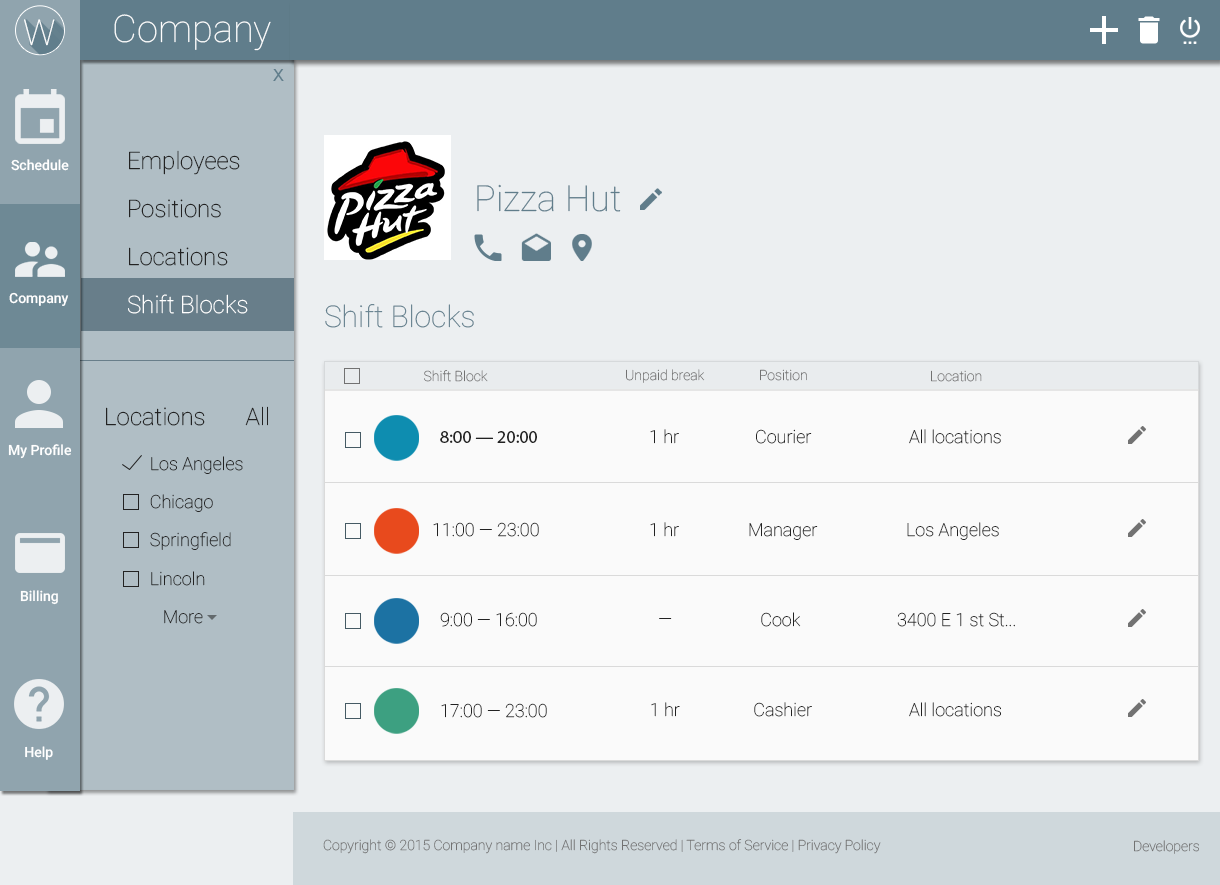
<style>
.page{position:relative;width:1220px;height:885px;background:#eceff1}
.page>*{position:absolute;margin:0}
.t1{font:38px "Roboto-Thin";color:#ffffff}
.t2{font:35.7px "Roboto-Thin";color:#ffffff}
.t3{font:18px "Raavi";color:#607d8b}
.t4{font:24px/48px "Roboto-Thin";color:#222222}
.t5{font:24px/48px "Roboto-Thin";color:#ffffff}
.t6{font:14px "Roboto-Medium";color:#ffffff}
.t7{font:36px "Roboto-Thin";color:#607d8b}
.t8{font:30px "Roboto-Thin";color:#607d8b}
.t9{font:14px "Roboto-Thin";color:#727272}
.t10{font:24px "Roboto-Thin";color:#222222}
.t11{font:18px "MyriadPro-Regular";color:#222222}
.t12{font:18px "Roboto-Thin";color:#222222}
.t13{font:18px/38px "Roboto-Thin";color:#222222}
.t14{font:18px/39px "Roboto-Thin";color:#222222}
</style>
<div class="page">
<p class="t1" style="left:114px;top:14px;width:157px;height:37px">Company</p>
<p class="t2" style="left:24px;top:19px;width:31px;height:27px">W</p>
<p class="t3" style="left:273px;top:69px;width:11px;height:12px">X</p>
<p class="t4" style="left:128px;top:150px;width:120px;height:164px">Employees<br>Positions<br>Locations<br><span class="t5">Shift Blocks</span></p>
<p class="t6" style="left:11px;top:159px;width:58px;height:12px">Schedule</p>
<p class="t7" style="left:477px;top:184px;width:144px;height:28px">Pizza Hut</p>
<p class="t6" style="left:9px;top:292px;width:60px;height:14px">Company</p>
<p class="t8" style="left:325px;top:304px;width:149px;height:24px">Shift Blocks</p>
<p class="t9" style="left:424px;top:370px;width:64px;height:12px">Shift Block</p>
<p class="t9" style="left:626px;top:369px;width:79px;height:14px">Unpaid break</p>
<p class="t9" style="left:760px;top:369px;width:47px;height:12px">Position</p>
<p class="t9" style="left:931px;top:370px;width:51px;height:12px">Location</p>
<p class="t10" style="left:106px;top:406px;width:162px;height:20px">Locations       All</p>
<p class="t11" style="left:440px;top:431px;width:97px;height:12px">8:00 — 20:00</p>
<p class="t12" style="left:650px;top:429px;width:29px;height:15px">1 hr</p>
<p class="t12" style="left:756px;top:429px;width:56px;height:15px">Courier</p>
<p class="t12" style="left:909px;top:429px;width:92px;height:15px">All locations</p>
<p class="t6" style="left:8px;top:444px;width:64px;height:15px">My Profile</p>
<p class="t13" style="left:150px;top:456px;width:93px;height:168px"><span class="t12">Los Angeles<br></span>Chicago<br>Springfield<br><span class="t14">Lincoln<br></span>   More</p>
<p class="t12" style="left:433px;top:522px;width:106px;height:15px">11:00 — 23:00</p>
<p class="t12" style="left:650px;top:522px;width:29px;height:15px">1 hr</p>
<p class="t12" style="left:749px;top:523px;width:69px;height:17px">Manager</p>
<p class="t12" style="left:907px;top:522px;width:92px;height:18px">Los Angeles</p>
<p class="t6" style="left:20px;top:590px;width:38px;height:15px">Billing</p>
<p class="t12" style="left:440px;top:612px;width:97px;height:15px">9:00 — 16:00</p>
<p class="t12" style="left:761px;top:612px;width:40px;height:15px">Cook</p>
<p class="t12" style="left:897px;top:612px;width:118px;height:15px">3400 E 1 st St...</p>
<p class="t12" style="left:659px;top:618px;width:13px;height:1px">—</p>
<p class="t12" style="left:651px;top:702px;width:29px;height:15px">1 hr</p>
<p class="t12" style="left:754px;top:702px;width:58px;height:15px">Cashier</p>
<p class="t12" style="left:909px;top:702px;width:92px;height:15px">All locations</p>
<p class="t12" style="left:441px;top:703px;width:106px;height:15px">17:00 — 23:00</p>
<p class="t6" style="left:25px;top:746px;width:28px;height:14px">Help</p>
<p class="t9" style="left:323px;top:839px;width:558px;height:15px">Copyright © 2015 Company name Inc | All Rights Reserved | Terms of Service | Privacy Policy</p>
<p class="t9" style="left:1134px;top:840px;width:65px;height:14px">Developers</p>
</div>
